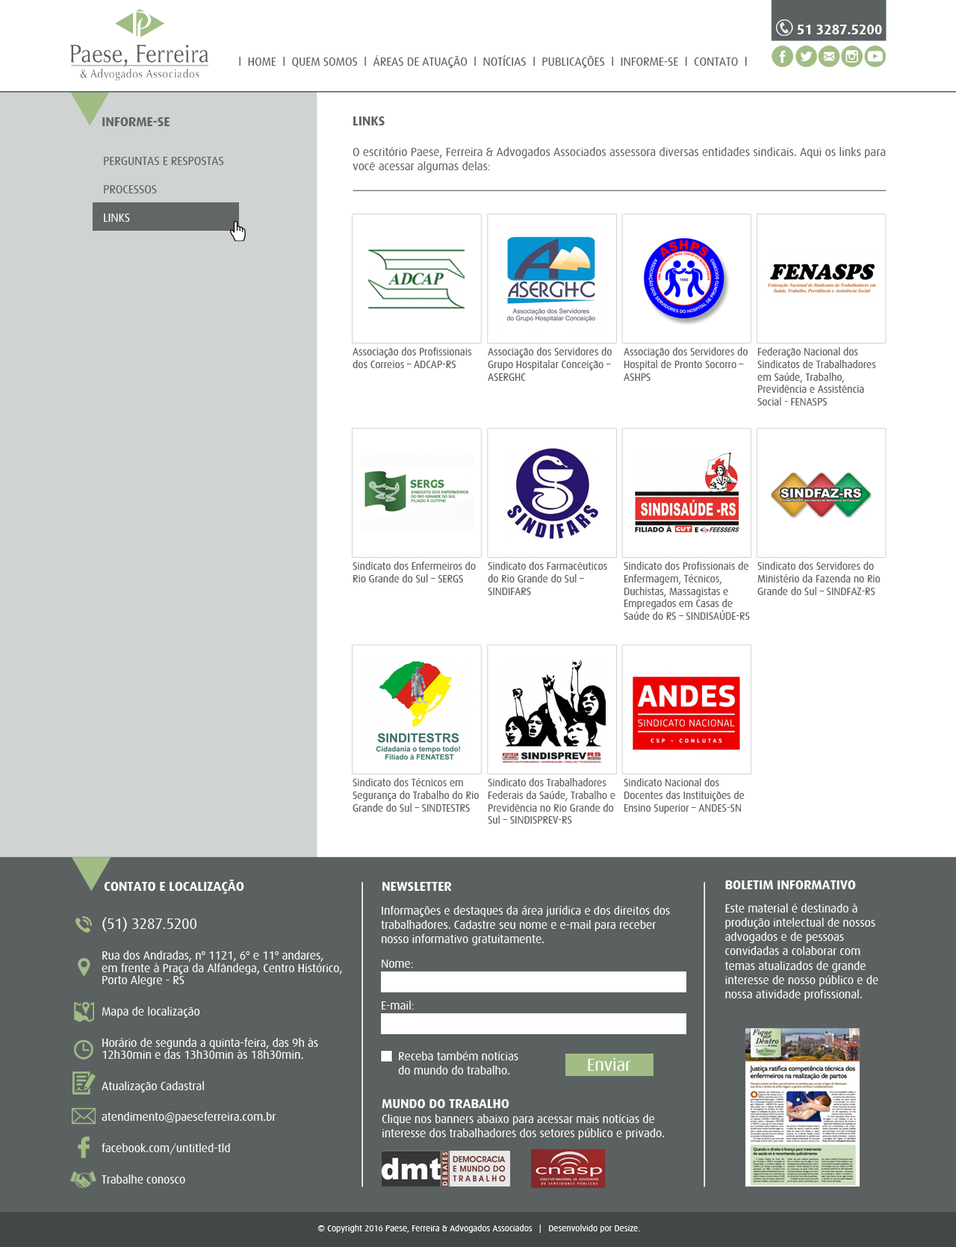
<style>
.page{position:relative;width:956px;height:1247px;background:#ffffff}
.page>*{position:absolute;margin:0}
.t1{font:14.1px "Dax-Bold";letter-spacing:-0.01em;color:#ffffff}
.t2{font:12px "Dax-Regular";letter-spacing:-0.01em;color:#5b6161}
.t3{font:11px "ArialMT";letter-spacing:-0.01em;color:#000000}
.t4{font:13.4px "Dax-Bold";letter-spacing:-0.01em;color:#626665}
.t5{font:12px "Dax-Regular";letter-spacing:-0.01em;color:#626665}
.t6{font:10.5px "Dax-Regular";letter-spacing:-0.01em;color:#626665}
.t7{font:13.4px "Dax-Bold";letter-spacing:-0.01em;color:#ffffff}
.t8{font:12px "Dax-Regular";letter-spacing:-0.01em;color:#ffffff}
.t9{font:12px/12.4px "Dax-Regular";letter-spacing:-0.01em;color:#ffffff}
.t10{font:14.9px/12.4px "Dax-Regular";letter-spacing:-0.01em;color:#ffffff}
.t11{font:17.7px "Dax-Regular";letter-spacing:-0.01em;color:#ffffff}
.t12{font:9px "Dax-Regular";letter-spacing:-0.01em;color:#ffffff}
</style>
<div class="page">
<p class="t1" style="left:797px;top:25px;width:85px;height:9px">51 3287.5200</p>
<p class="t2" style="left:239px;top:55px;width:508px;height:13px"><span class="t3"><br></span>l  HOME  l  QUEM SOMOS  l  ÁREAS DE ATUAÇÃO  l  NOTÍCIAS  l  PUBLICAÇÕES  l  INFORME-SE  l  CONTATO  l</p>
<p class="t4" style="left:102px;top:117px;width:68px;height:9px">INFORME-SE</p>
<p class="t5" style="left:353px;top:117px;width:533px;height:56px"><span class="t4">LINKS<br><br></span>O escritório Paese, Ferreira &amp; Advogados Associados assessora diversas entidades sindicais. Aqui os links para você acessar algumas delas:</p>
<p class="t6" style="left:353px;top:347px;width:119px;height:21px">Associação dos Profissionais dos Correios – ADCAP-RS</p>
<p class="t6" style="left:488px;top:347px;width:124px;height:34px">Associação dos Servidores do Grupo Hospitalar Conceição – ASERGHC</p>
<p class="t6" style="left:624px;top:347px;width:124px;height:34px">Associação dos Servidores do Hospital de Pronto Socorro – ASHPS</p>
<p class="t6" style="left:757px;top:347px;width:119px;height:59px">Federação Nacional dos Sindicatos de Trabalhadores em Saúde, Trabalho, Previdência e Assistência Social - FENASPS</p>
<p class="t6" style="left:353px;top:562px;width:123px;height:21px">Sindicato dos Enfermeiros do Rio Grande do Sul – SERGS</p>
<p class="t6" style="left:488px;top:562px;width:119px;height:33px">Sindicato dos Farmacêuticos do Rio Grande do Sul – SINDIFARS</p>
<p class="t6" style="left:624px;top:562px;width:126px;height:58px">Sindicato dos Profissionais de Enfermagem, Técnicos, Duchistas, Massagistas e Empregados em Casas de Saúde do RS – SINDISAÚDE-RS</p>
<p class="t6" style="left:757px;top:562px;width:124px;height:33px">Sindicato dos Servidores do Ministério da Fazenda no Rio Grande do Sul – SINDFAZ-RS</p>
<p class="t6" style="left:353px;top:778px;width:126px;height:34px">Sindicato dos Técnicos em Segurança do Trabalho do Rio Grande do Sul – SINDTESTRS</p>
<p class="t6" style="left:488px;top:778px;width:127px;height:46px">Sindicato dos Trabalhadores Federais da Saúde, Trabalho e Previdência no Rio Grande do Sul – SINDISPREV-RS</p>
<p class="t6" style="left:624px;top:778px;width:121px;height:36px">Sindicato Nacional dos Docentes das Instituições de Ensino Superior – ANDES-SN</p>
<p class="t7" style="left:104px;top:880px;width:140px;height:14px">CONTATO E LOCALIZAÇÃO</p>
<p class="t8" style="left:725px;top:881px;width:153px;height:120px"><span class="t7">BOLETIM INFORMATIVO<br><br></span>Este material é destinado à produção intelectual de nossos advogados e de pessoas convidadas a colaborar com temas atualizados de grande interesse de nosso público e de nossa atividade profissional.</p>
<p class="t7" style="left:382px;top:882px;width:70px;height:9px">NEWSLETTER</p>
<p class="t8" style="left:381px;top:906px;width:289px;height:40px">Informações e destaques da área jurídica e dos direitos dos trabalhadores. Cadastre seu nome e e-mail para receber nosso informativo gratuitamente.</p>
<p class="t9" style="left:102px;top:917px;width:240px;height:267px"><span class="t10">(51) 3287.5200<br><br></span>Rua dos Andradas, nº 1121, 6º e 11º andares, <br>em frente à Praça da Alfândega, Centro Histórico, Porto Alegre - RS<br><br>Mapa de localização<br><br>Horário de segunda a quinta-feira, das 9h às 12h30min e das 13h30min às 18h30min.<br><br>Atualização Cadastral<br><br>atendimento@paeseferreira.com.br<br><br>facebook.com/untitled-tld<br><br>Trabalhe conosco</p>
<p class="t8" style="left:382px;top:960px;width:31px;height:8px">Nome:</p>
<p class="t8" style="left:382px;top:1001px;width:32px;height:9px">E-mail:</p>
<p class="t8" style="left:398px;top:1052px;width:120px;height:23px">Receba também notícias<br>do mundo do trabalho.</p>
<p class="t11" style="left:588px;top:1058px;width:43px;height:13px">Enviar</p>
<p class="t8" style="left:382px;top:1099px;width:283px;height:41px"><span class="t7">MUNDO DO TRABALHO <br></span>Clique nos banners abaixo para acessar mais notícias de <br>interesse dos trabalhadores dos setores público e privado.</p>
<p class="t12" style="left:317px;top:1225px;width:323px;height:8px">© Copyright 2016 Paese, Ferreira &amp; Advogados Associados   |   Desenvolvido por Desize.</p>
</div>
